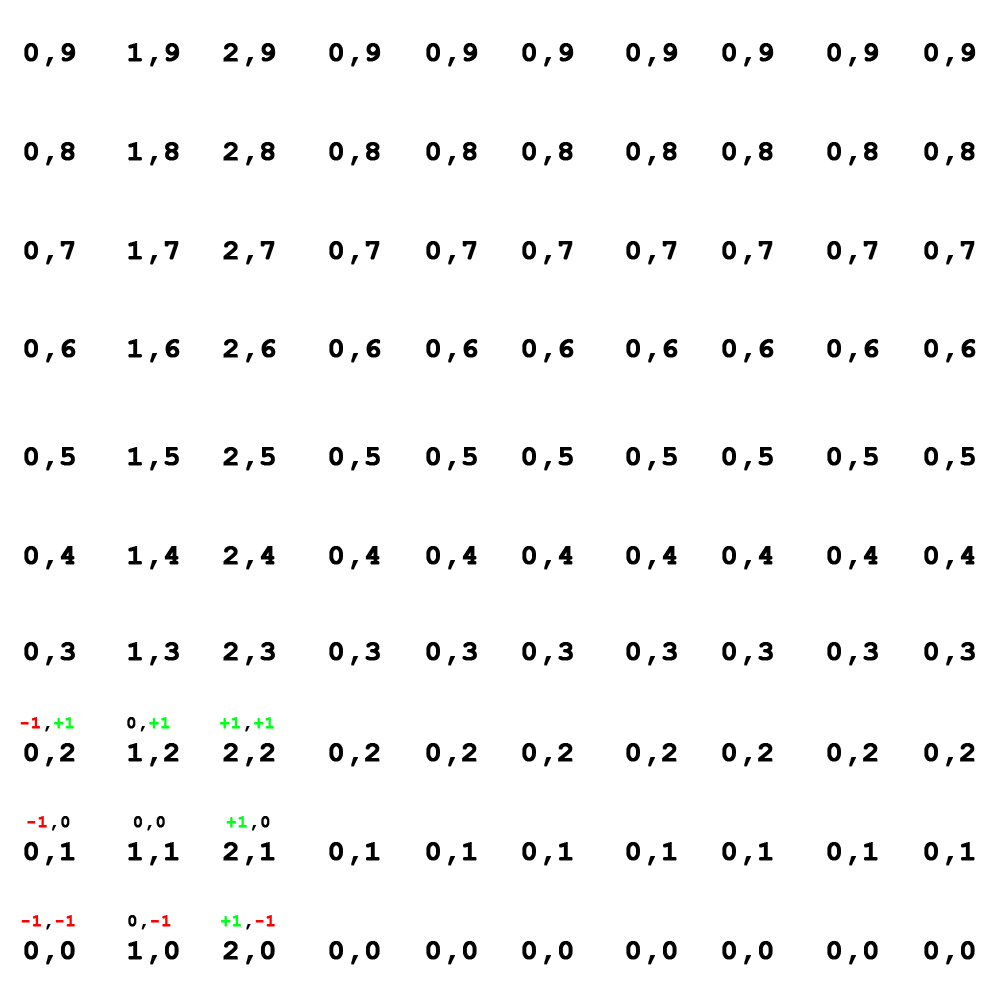
<style>
.page{position:relative;width:1000px;height:1000px;background:#ffffff}
.page>*{position:absolute;margin:0}
.t1{font:29.2px "CourierNewPS-BoldMT";color:#000000;font-variant:small-caps;font-weight:bold}
.t2{font:16.7px "CourierNewPS-BoldMT";color:#ff0000;font-variant:small-caps;font-weight:bold}
.t3{font:16.7px "CourierNewPS-BoldMT";color:#000000;font-variant:small-caps;font-weight:bold}
.t4{font:16.7px "CourierNewPS-BoldMT";color:#00ff18;font-variant:small-caps;font-weight:bold}
</style>
<div class="page">
<p class="t1" style="left:24px;top:43px;width:52px;height:24px">0,9</p>
<p class="t1" style="left:128px;top:43px;width:52px;height:24px">1,9</p>
<p class="t1" style="left:223px;top:43px;width:53px;height:24px">2,9</p>
<p class="t1" style="left:329px;top:43px;width:52px;height:24px">0,9</p>
<p class="t1" style="left:426px;top:43px;width:52px;height:24px">0,9</p>
<p class="t1" style="left:522px;top:43px;width:52px;height:24px">0,9</p>
<p class="t1" style="left:626px;top:43px;width:52px;height:24px">0,9</p>
<p class="t1" style="left:722px;top:43px;width:52px;height:24px">0,9</p>
<p class="t1" style="left:827px;top:43px;width:52px;height:24px">0,9</p>
<p class="t1" style="left:924px;top:43px;width:52px;height:24px">0,9</p>
<p class="t1" style="left:24px;top:142px;width:51px;height:24px">0,8</p>
<p class="t1" style="left:128px;top:142px;width:51px;height:24px">1,8</p>
<p class="t1" style="left:223px;top:142px;width:52px;height:24px">2,8</p>
<p class="t1" style="left:329px;top:142px;width:51px;height:24px">0,8</p>
<p class="t1" style="left:426px;top:142px;width:51px;height:24px">0,8</p>
<p class="t1" style="left:522px;top:142px;width:51px;height:24px">0,8</p>
<p class="t1" style="left:626px;top:142px;width:51px;height:24px">0,8</p>
<p class="t1" style="left:722px;top:142px;width:51px;height:24px">0,8</p>
<p class="t1" style="left:827px;top:142px;width:51px;height:24px">0,8</p>
<p class="t1" style="left:924px;top:142px;width:51px;height:24px">0,8</p>
<p class="t1" style="left:24px;top:241px;width:51px;height:24px">0,7</p>
<p class="t1" style="left:128px;top:241px;width:51px;height:24px">1,7</p>
<p class="t1" style="left:223px;top:241px;width:52px;height:24px">2,7</p>
<p class="t1" style="left:329px;top:241px;width:51px;height:24px">0,7</p>
<p class="t1" style="left:426px;top:241px;width:51px;height:24px">0,7</p>
<p class="t1" style="left:522px;top:241px;width:51px;height:24px">0,7</p>
<p class="t1" style="left:626px;top:241px;width:51px;height:24px">0,7</p>
<p class="t1" style="left:722px;top:241px;width:51px;height:24px">0,7</p>
<p class="t1" style="left:827px;top:241px;width:51px;height:24px">0,7</p>
<p class="t1" style="left:924px;top:241px;width:51px;height:24px">0,7</p>
<p class="t1" style="left:24px;top:339px;width:52px;height:24px">0,6</p>
<p class="t1" style="left:128px;top:339px;width:52px;height:24px">1,6</p>
<p class="t1" style="left:223px;top:339px;width:53px;height:24px">2,6</p>
<p class="t1" style="left:329px;top:339px;width:52px;height:24px">0,6</p>
<p class="t1" style="left:426px;top:339px;width:52px;height:24px">0,6</p>
<p class="t1" style="left:522px;top:339px;width:52px;height:24px">0,6</p>
<p class="t1" style="left:626px;top:339px;width:52px;height:24px">0,6</p>
<p class="t1" style="left:722px;top:339px;width:52px;height:24px">0,6</p>
<p class="t1" style="left:827px;top:339px;width:52px;height:24px">0,6</p>
<p class="t1" style="left:924px;top:339px;width:52px;height:24px">0,6</p>
<p class="t1" style="left:24px;top:447px;width:51px;height:24px">0,5</p>
<p class="t1" style="left:128px;top:447px;width:51px;height:24px">1,5</p>
<p class="t1" style="left:223px;top:447px;width:52px;height:24px">2,5</p>
<p class="t1" style="left:329px;top:447px;width:51px;height:24px">0,5</p>
<p class="t1" style="left:426px;top:447px;width:51px;height:24px">0,5</p>
<p class="t1" style="left:522px;top:447px;width:51px;height:24px">0,5</p>
<p class="t1" style="left:626px;top:447px;width:51px;height:24px">0,5</p>
<p class="t1" style="left:722px;top:447px;width:51px;height:24px">0,5</p>
<p class="t1" style="left:827px;top:447px;width:51px;height:24px">0,5</p>
<p class="t1" style="left:924px;top:447px;width:51px;height:24px">0,5</p>
<p class="t1" style="left:24px;top:546px;width:51px;height:24px">0,4</p>
<p class="t1" style="left:128px;top:546px;width:51px;height:24px">1,4</p>
<p class="t1" style="left:223px;top:546px;width:52px;height:24px">2,4</p>
<p class="t1" style="left:329px;top:546px;width:51px;height:24px">0,4</p>
<p class="t1" style="left:426px;top:546px;width:51px;height:24px">0,4</p>
<p class="t1" style="left:522px;top:546px;width:51px;height:24px">0,4</p>
<p class="t1" style="left:626px;top:546px;width:51px;height:24px">0,4</p>
<p class="t1" style="left:722px;top:546px;width:51px;height:24px">0,4</p>
<p class="t1" style="left:827px;top:546px;width:51px;height:24px">0,4</p>
<p class="t1" style="left:924px;top:546px;width:51px;height:24px">0,4</p>
<p class="t1" style="left:24px;top:642px;width:51px;height:24px">0,3</p>
<p class="t1" style="left:128px;top:642px;width:51px;height:24px">1,3</p>
<p class="t1" style="left:223px;top:642px;width:52px;height:24px">2,3</p>
<p class="t1" style="left:329px;top:642px;width:51px;height:24px">0,3</p>
<p class="t1" style="left:426px;top:642px;width:51px;height:24px">0,3</p>
<p class="t1" style="left:522px;top:642px;width:51px;height:24px">0,3</p>
<p class="t1" style="left:626px;top:642px;width:51px;height:24px">0,3</p>
<p class="t1" style="left:722px;top:642px;width:51px;height:24px">0,3</p>
<p class="t1" style="left:827px;top:642px;width:51px;height:24px">0,3</p>
<p class="t1" style="left:924px;top:642px;width:51px;height:24px">0,3</p>
<p class="t2" style="left:20px;top:717px;width:54px;height:15px">-1<span class="t3">,</span><span class="t4">+1</span></p>
<p class="t3" style="left:127px;top:717px;width:43px;height:15px">0,<span class="t4">+1</span></p>
<p class="t4" style="left:220px;top:717px;width:54px;height:15px">+1<span class="t3">,</span>+1</p>
<p class="t1" style="left:24px;top:743px;width:51px;height:24px">0,2</p>
<p class="t1" style="left:128px;top:743px;width:51px;height:24px">1,2</p>
<p class="t1" style="left:223px;top:743px;width:52px;height:24px">2,2</p>
<p class="t1" style="left:329px;top:743px;width:51px;height:24px">0,2</p>
<p class="t1" style="left:426px;top:743px;width:51px;height:24px">0,2</p>
<p class="t1" style="left:522px;top:743px;width:51px;height:24px">0,2</p>
<p class="t1" style="left:626px;top:743px;width:51px;height:24px">0,2</p>
<p class="t1" style="left:722px;top:743px;width:51px;height:24px">0,2</p>
<p class="t1" style="left:827px;top:743px;width:51px;height:24px">0,2</p>
<p class="t1" style="left:924px;top:743px;width:51px;height:24px">0,2</p>
<p class="t2" style="left:27px;top:816px;width:43px;height:15px">-1<span class="t3">,0</span></p>
<p class="t3" style="left:133px;top:816px;width:32px;height:15px">0,0</p>
<p class="t4" style="left:226px;top:816px;width:44px;height:15px">+1<span class="t3">,0</span></p>
<p class="t1" style="left:24px;top:842px;width:51px;height:24px">0,1</p>
<p class="t1" style="left:128px;top:842px;width:51px;height:24px">1,1</p>
<p class="t1" style="left:223px;top:842px;width:52px;height:24px">2,1</p>
<p class="t1" style="left:329px;top:842px;width:51px;height:24px">0,1</p>
<p class="t1" style="left:426px;top:842px;width:51px;height:24px">0,1</p>
<p class="t1" style="left:522px;top:842px;width:51px;height:24px">0,1</p>
<p class="t1" style="left:626px;top:842px;width:51px;height:24px">0,1</p>
<p class="t1" style="left:722px;top:842px;width:51px;height:24px">0,1</p>
<p class="t1" style="left:827px;top:842px;width:51px;height:24px">0,1</p>
<p class="t1" style="left:924px;top:842px;width:51px;height:24px">0,1</p>
<p class="t2" style="left:21px;top:915px;width:54px;height:15px">-1<span class="t3">,</span>-1</p>
<p class="t3" style="left:128px;top:915px;width:43px;height:15px">0,<span class="t2">-1</span></p>
<p class="t4" style="left:221px;top:915px;width:54px;height:15px">+1<span class="t3">,</span><span class="t2">-1</span></p>
<p class="t1" style="left:24px;top:941px;width:51px;height:24px">0,0</p>
<p class="t1" style="left:128px;top:941px;width:51px;height:24px">1,0</p>
<p class="t1" style="left:223px;top:941px;width:52px;height:24px">2,0</p>
<p class="t1" style="left:329px;top:941px;width:51px;height:24px">0,0</p>
<p class="t1" style="left:426px;top:941px;width:51px;height:24px">0,0</p>
<p class="t1" style="left:522px;top:941px;width:51px;height:24px">0,0</p>
<p class="t1" style="left:626px;top:941px;width:51px;height:24px">0,0</p>
<p class="t1" style="left:722px;top:941px;width:51px;height:24px">0,0</p>
<p class="t1" style="left:827px;top:941px;width:51px;height:24px">0,0</p>
<p class="t1" style="left:924px;top:941px;width:51px;height:24px">0,0</p>
</div>
